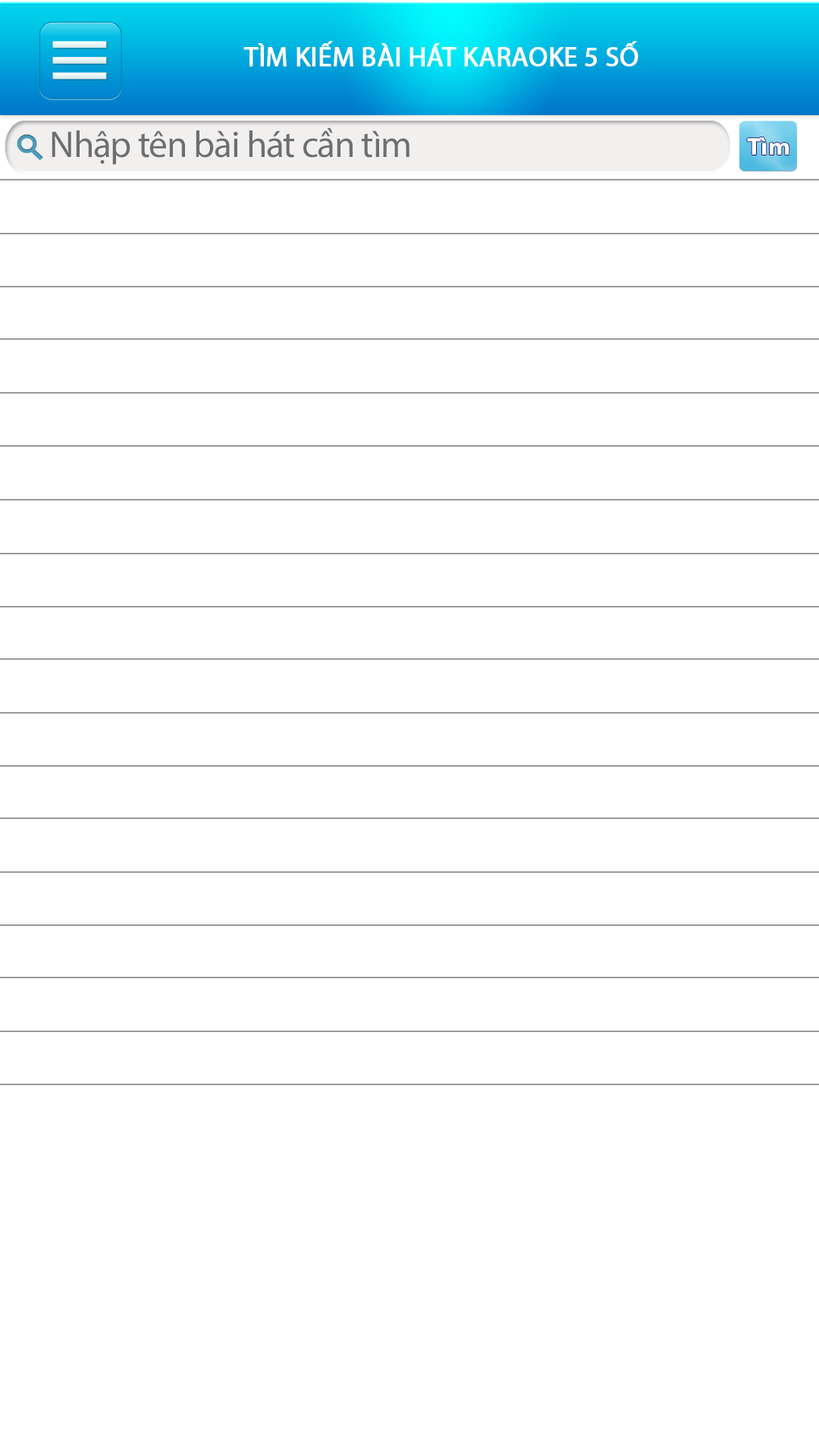
<style>
.page{position:relative;width:819px;height:1456px;background:#ffffff}
.page>*{position:absolute;margin:0}
.t1{font:27.3px "MyriadPro-Regular";color:#ffffff;text-transform:uppercase;font-weight:bold}
.t2{font:37.5px "MyriadPro-Regular";letter-spacing:-0.025em;color:#6e6e6e}
.t3{font:24.4px "MyriadPro-Bold";letter-spacing:0.005em;color:#fffefe;scale:1.06 1}
</style>
<div class="page">
<p class="t1" style="left:243px;top:41px;width:396px;height:26px">TÌM KIẾM BÀI HÁT KARAOKE 5 SỐ</p>
<p class="t2" style="left:52px;top:127px;width:357px;height:38px">Nhập tên bài hát cần tìm</p>
<p class="t3" style="left:747px;top:137px;width:42px;height:18px">Tìm</p>
</div>
